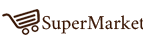
<style>
.page{position:relative;width:143px;height:43px;background:#ffffff}
.page>*{position:absolute;margin:0}
.t1{font:20px "Amiri-Regular";color:#391503}
</style>
<div class="page">
<p class="t1" style="left:42px;top:15px;width:103px;height:19px">SuperMarket</p>
</div>
